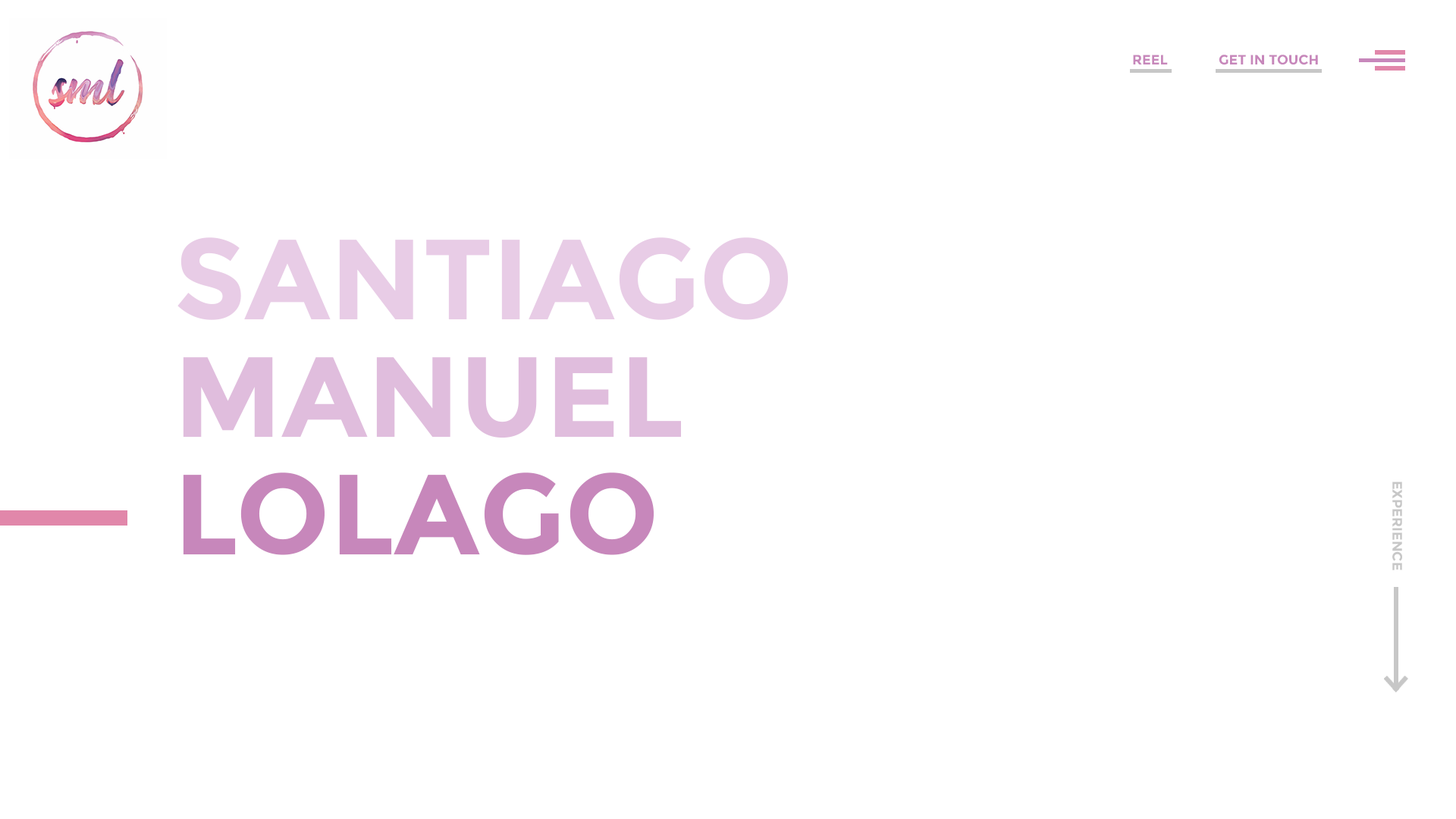
<style>
.page{position:relative;width:1456px;height:819px;background:#ffffff}
.page>*{position:absolute;margin:0}
.t1{font:13.6px "Montserrat-Bold";color:#c787bb}
.t2{font:113.7px/117.5px "Montserrat-Bold";color:#e8cce6}
.t3{font:113.7px/117.5px "Montserrat-Bold";color:#e0bddd}
.t4{font:113.7px/117.5px "Montserrat-Bold";color:#c787bb}
.t5{font:13.6px "Montserrat-Bold";color:#c7c7c7}
</style>
<div class="page">
<p class="t1" style="left:1133px;top:55px;width:35px;height:9px">REEL</p>
<p class="t1" style="left:1219px;top:55px;width:99px;height:10px">GET IN TOUCH</p>
<p class="t2" style="left:177px;top:237px;width:611px;height:318px">SANTIAGO<br><span class="t3">MANUEL<br></span><span class="t4">LOLAGO</span></p>
<p class="t5" style="left:1392px;top:482px;width:10px;height:88px;rotate:90deg">EXPERIENCE</p>
</div>
